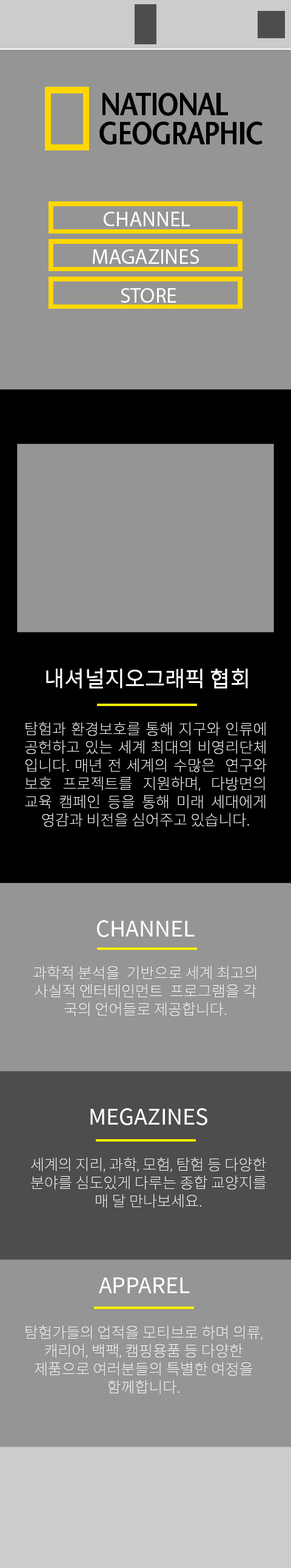
<style>
.page{position:relative;width:291px;height:1568px;background:#959595}
.page>*{position:absolute;margin:0}
.t1{font:21.2px "MyriadPro-Regular";color:#ffffff}
.t2{font:21.8px "SpoqaHanSans-Regular";color:#ffffff}
.t3{font:15.2px "SpoqaHanSans-Thin";color:#ffffff}
</style>
<div class="page">
<p class="t1" style="left:104px;top:212px;width:86px;height:14px">CHANNEL</p>
<p class="t1" style="left:93px;top:249px;width:106px;height:15px">MAGAZINES</p>
<p class="t1" style="left:121px;top:288px;width:56px;height:15px">STORE</p>
<p class="t2" style="left:46px;top:668px;width:202px;height:20px">내셔널지오그래픽 협회</p>
<p class="t3" style="left:25px;top:722px;width:242px;height:105px;text-align:justify">탐험과 환경보호를 통해 지구와 인류에 공헌하고 있는 세계 최대의 비영리단체 입니다. 매년 전 세계의 수많은  연구와 보호 프로젝트를 지원하며, 다방면의 교육 캠페인 등을 통해 미래 세대에게 영감과 비전을 심어주고 있습니다.</p>
<p class="t2" style="left:97px;top:920px;width:98px;height:17px">CHANNEL</p>
<p class="t3" style="left:33px;top:966px;width:224px;height:51px;text-align:center">과학적 분석을  기반으로 세계 최고의 사실적 엔터테인먼트  프로그램을 각 국의 언어들로 제공합니다.</p>
<p class="t2" style="left:90px;top:1108px;width:117px;height:17px">MEGAZINES</p>
<p class="t3" style="left:31px;top:1157px;width:235px;height:51px;text-align:center">세계의 지리, 과학, 모험, 탐험 등 다양한 분야를 심도있게 다루는 종합 교양지를 매 달 만나보세요.</p>
<p class="t2" style="left:99px;top:1277px;width:91px;height:16px">APPAREL</p>
<p class="t3" style="left:25px;top:1325px;width:238px;height:69px;text-align:center">탐험가들의 업적을 모티브로 하며 의류, 캐리어, 백팩, 캠핑용품 등 다양한 제품으로 여러분들의 특별한 여정을 함께합니다.</p>
</div>
